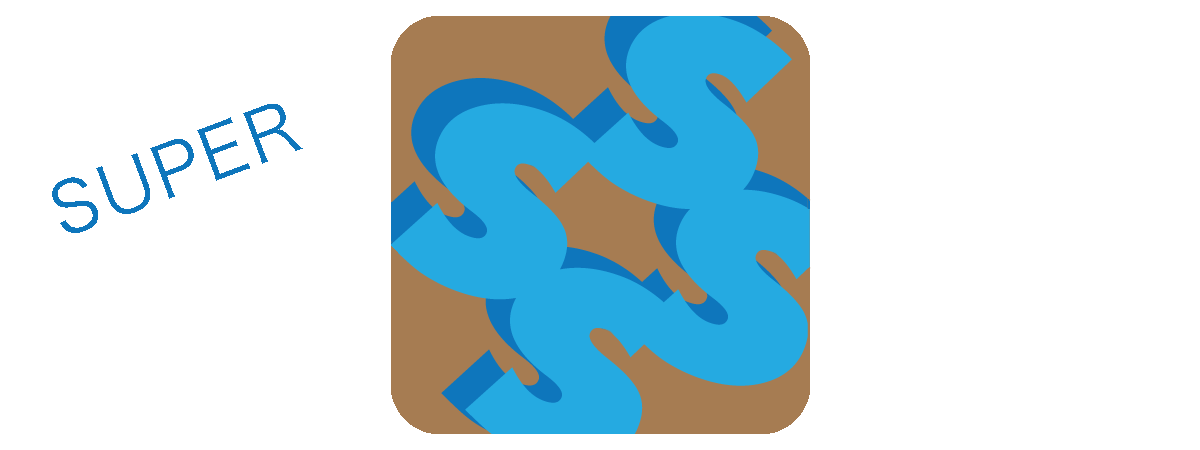
<style>
.page{position:relative;width:1200px;height:450px;background:#ffffff}
.page>*{position:absolute;margin:0}
.t1{font:70.8px "HiraKakuProN-W3";letter-spacing:0.05em;color:#0e76bc}
</style>
<div class="page">
<p class="t1" style="left:52px;top:104px;width:251px;height:129px;rotate:-20deg">SUPER</p>
</div>
